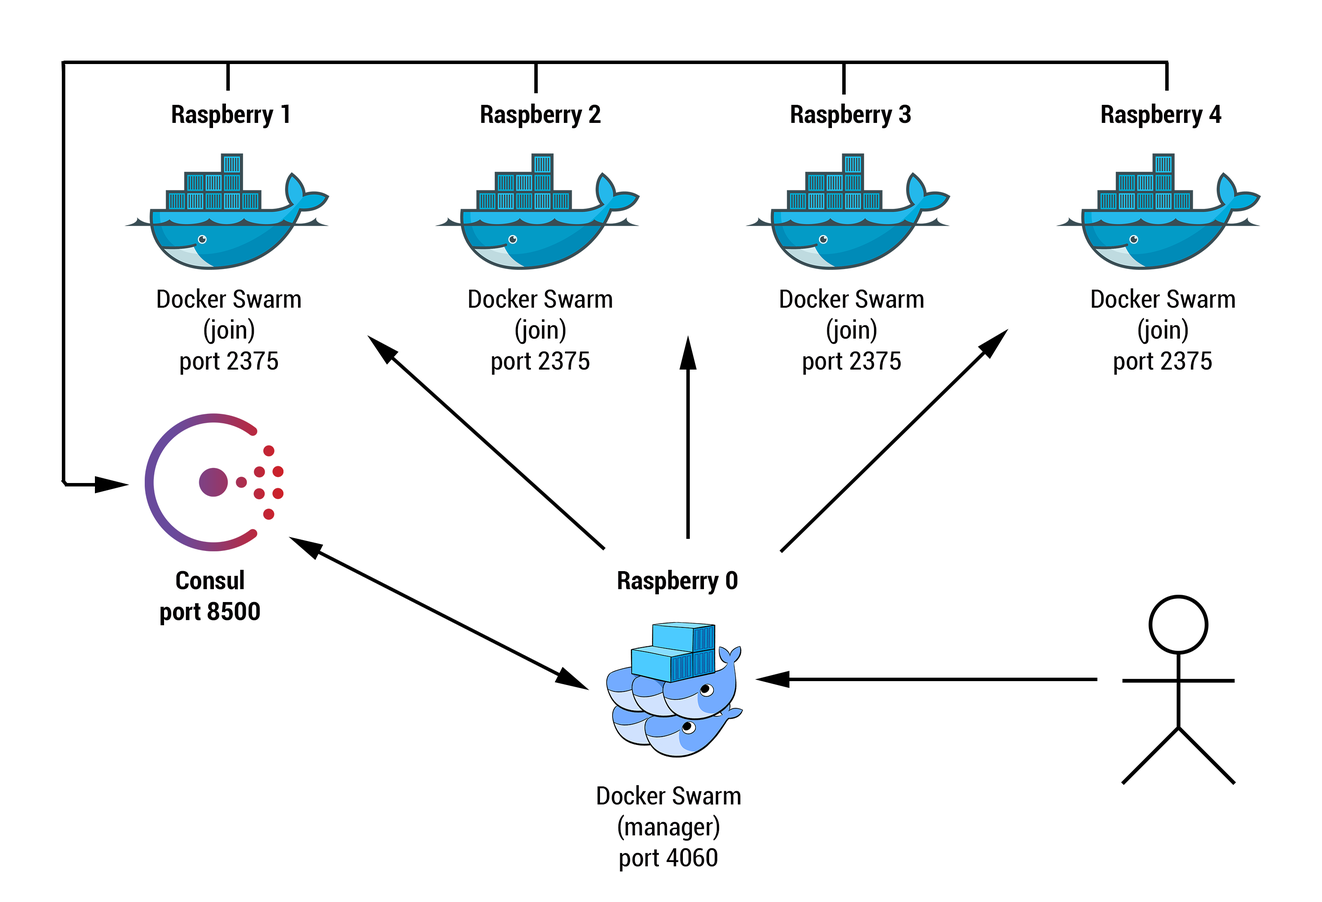
<style>
.page{position:relative;width:1322px;height:902px;background:#ffffff}
.page>*{position:absolute;margin:0}
.t1{font:25.8px "Roboto-BoldCondensed";color:#040203}
.t2{font:25.8px "Roboto-Condensed";color:#040203}
</style>
<div class="page">
<p class="t1" style="left:172px;top:104px;width:117px;height:24px">Raspberry 1</p>
<p class="t1" style="left:481px;top:104px;width:120px;height:24px">Raspberry 2</p>
<p class="t1" style="left:791px;top:104px;width:120px;height:24px">Raspberry 3</p>
<p class="t1" style="left:1102px;top:104px;width:120px;height:24px">Raspberry 4</p>
<p class="t2" style="left:158px;top:288px;width:143px;height:87px;text-align:center">Docker Swarm<br>(join)<br>port 2375</p>
<p class="t2" style="left:469px;top:288px;width:143px;height:87px;text-align:center">Docker Swarm<br>(join)<br>port 2375</p>
<p class="t2" style="left:781px;top:288px;width:143px;height:87px;text-align:center">Docker Swarm<br>(join)<br>port 2375</p>
<p class="t2" style="left:1092px;top:288px;width:143px;height:87px;text-align:center">Docker Swarm<br>(join)<br>port 2375</p>
<p class="t1" style="left:160px;top:570px;width:100px;height:55px;text-align:center">Consul<br>port 8500</p>
<p class="t1" style="left:618px;top:570px;width:120px;height:25px">Raspberry 0</p>
<p class="t2" style="left:598px;top:785px;width:143px;height:86px;text-align:center">Docker Swarm<br>(manager)<br>port 4060</p>
</div>
